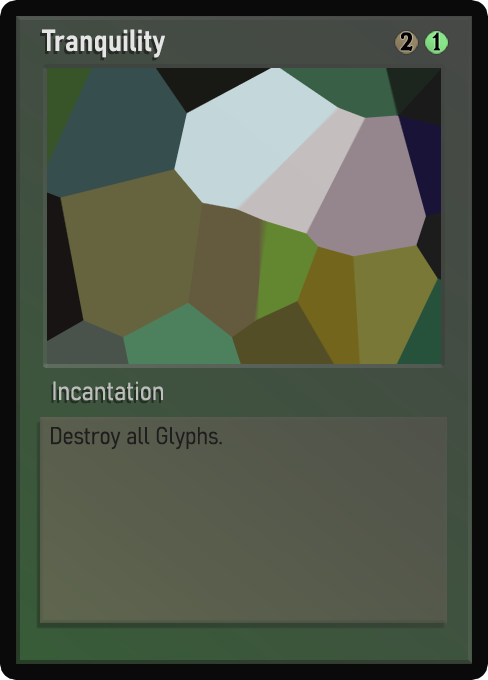
<style>
.page{position:relative;width:488px;height:680px}
.page>*{position:absolute;margin:0}
.t1{font:30px "Bahnschrift-SemiBoldSemiCondensed";color:#f2f2f2;font-weight:bold}
.t2{font:25px "WTRRoycroft";color:#000000;font-weight:bold;scale:1.09 1}
.t3{font:26px "Bahnschrift-LightSemiCondensed";color:#c8c8c8;font-weight:bold}
.t4{font:24px "Bahnschrift-LightSemiCondensed";color:#1e1e1e;font-weight:bold}
</style>
<div class="page">
<p class="t1" style="left:42px;top:29px;width:123px;height:29px;opacity:0.9">Tranquility</p>
<p class="t2" style="left:400px;top:32px;width:13px;height:19px">2</p>
<p class="t2" style="left:432px;top:32px;width:9px;height:19px">1</p>
<p class="t3" style="left:53px;top:381px;width:110px;height:20px;opacity:0.9">Incantation</p>
<p class="t4" style="left:51px;top:426px;width:171px;height:24px">Destroy all Glyphs.</p>
</div>
